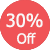
<style>
.page{position:relative;width:50px;height:50px;background:#f05356}
.page>*{position:absolute;margin:0}
.t1{font:18px "Tahoma";color:#f8f8f8}
.t2{font:14px "Tahoma";color:#f8f8f8}
</style>
<div class="page">
<p class="t1" style="left:6px;top:13px;width:37px;height:15px">30%</p>
<p class="t2" style="left:17px;top:32px;width:19px;height:12px">Off</p>
</div>
